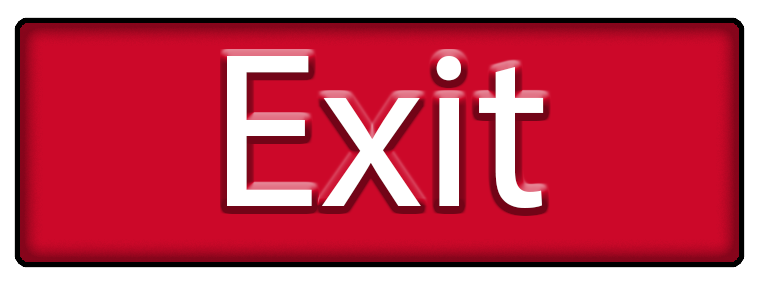
<style>
.page{position:relative;width:760px;height:285px;background:#cc0829}
.page>*{position:absolute;margin:0}
.t1{font:222.9px "MyriadPro-Regular";color:#ffffff}
</style>
<div class="page">
<p class="t1" style="left:227px;top:56px;width:317px;height:152px">Exit</p>
</div>
